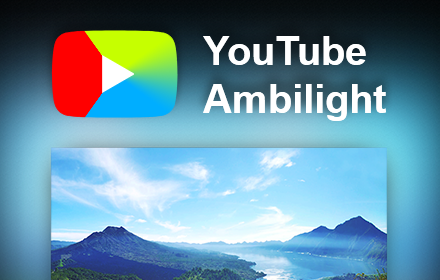
<style>
.page{position:relative;width:440px;height:280px}
.page>*{position:absolute;margin:0}
.t1{font:40px "Arial-BoldMT";color:#ffffff}
</style>
<div class="page">
<p class="t1" style="left:203px;top:36px;width:183px;height:85px">YouTube <br>Ambilight</p>
</div>
